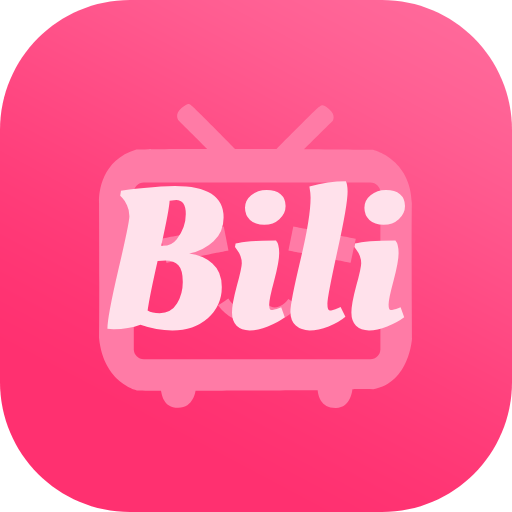
<style>
.page{position:relative;width:512px;height:512px}
.page>*{position:absolute;margin:0}
.t1{font:200px "OleoScript-Bold";color:#ffe1eb}
</style>
<div class="page">
<p class="t1" style="left:107px;top:181px;width:298px;height:150px">Bili</p>
</div>
